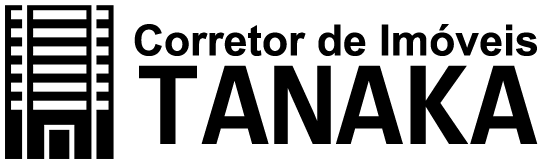
<style>
.page{position:relative;width:539px;height:164px;background:#ffffff}
.page>*{position:absolute;margin:0}
.t1{font:43px "Arial-BoldMT";color:#000000}
.t2{font:122.1px "Consolas-Bold";color:#000000}
</style>
<div class="page">
<p class="t1" style="left:134px;top:24px;width:403px;height:32px">Corretor de Imóveis</p>
<p class="t2" style="left:139px;top:65px;width:399px;height:79px">TANAKA</p>
</div>
